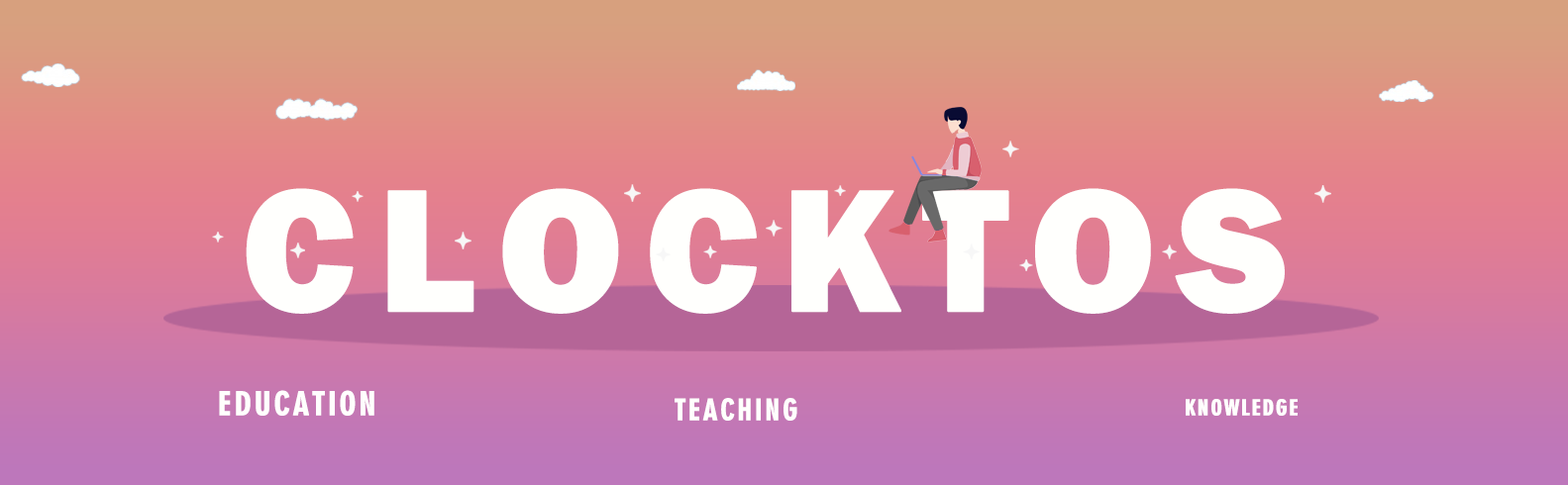
<style>
.page{position:relative;width:1568px;height:485px}
.page>*{position:absolute;margin:0}
.t1{font:180.3px "FranklinGothic-Heavy";letter-spacing:0.1em;color:#fffffd;font-weight:bold}
.t2{font:31.6px "Geometric706BT-BlackCondensedB";letter-spacing:0.06em;color:#fffffd;font-weight:bold}
.t3{font:28.1px "Geometric706BT-BlackCondensedB";letter-spacing:0.06em;color:#fffffd;font-weight:bold}
.t4{font:21px "Geometric706BT-BlackCondensedB";letter-spacing:0.06em;color:#fffffd;font-weight:bold}
</style>
<div class="page">
<p class="t1" style="left:246px;top:188px;width:1039px;height:126px">CLOCKTOS</p>
<p class="t2" style="left:219px;top:390px;width:155px;height:26px">EDUCATION</p>
<p class="t3" style="left:675px;top:398px;width:122px;height:23px">TEACHING</p>
<p class="t4" style="left:1186px;top:399px;width:112px;height:17px">KNOWLEDGE</p>
</div>
